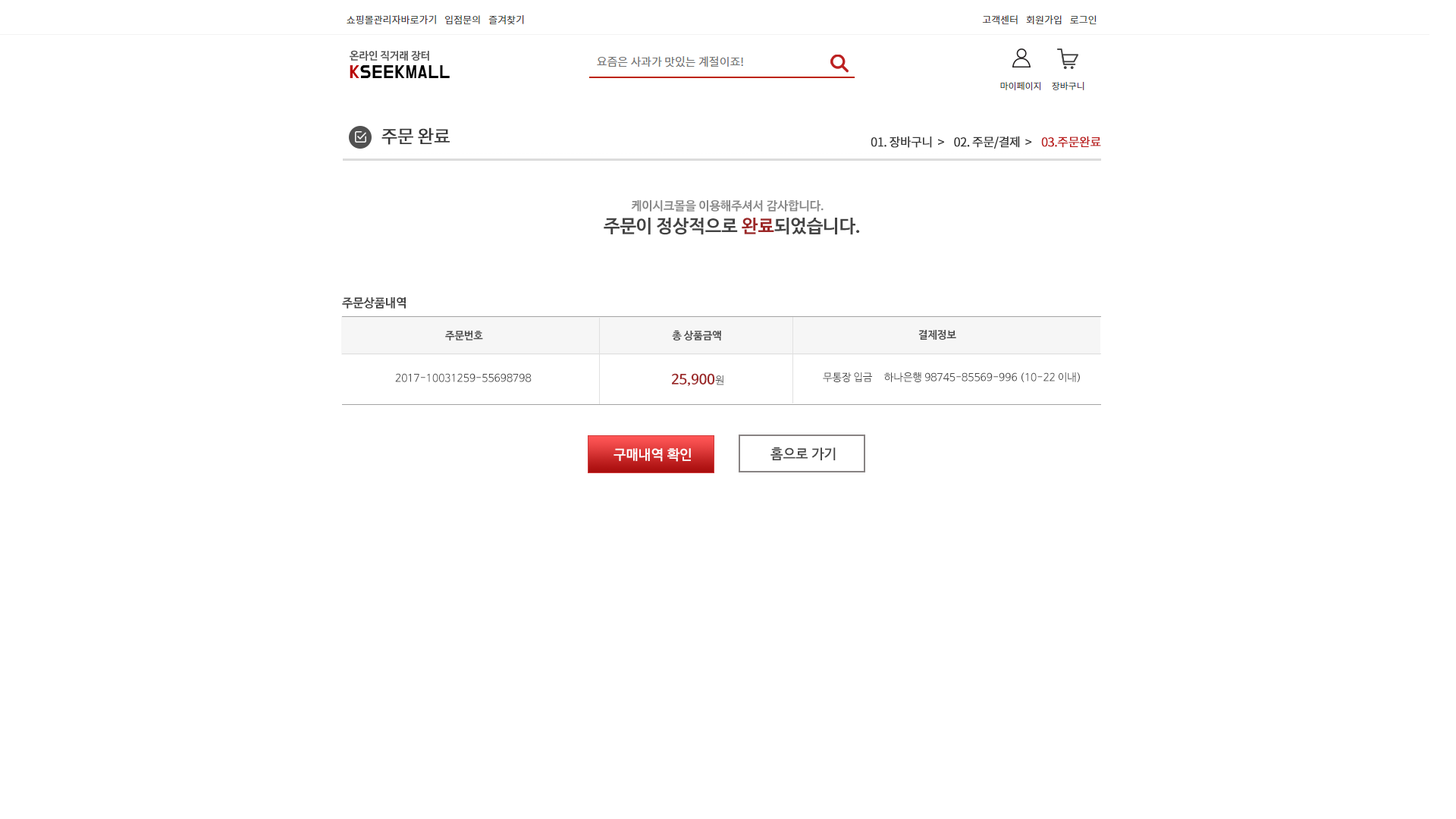
<style>
.page{position:relative;width:1456px;height:819px;background:#ffffff}
.page>*{position:absolute;margin:0}
.t1{font:18.2px "NotoSansCJKkr-Regular";letter-spacing:-0.05em;color:#373737;font-weight:bold}
.t2{font:12.1px "NotoSansCJKkr-Regular";letter-spacing:-0.05em;color:#373737;font-weight:bold}
.t3{font:12.1px "NotoSansCJKkr-Regular";letter-spacing:-0.05em;color:#bc2020;font-weight:bold}
.t4{font:12.1px "NanumBarunGothicBold";color:#888888}
.t5{font:18.2px "NanumBarunGothicBold";color:#434343}
.t6{font:18.2px "NanumBarunGothicBold";color:#9c2727}
.t7{font:12.1px "NanumBarunGothicBold";color:#434343}
.t8{font:10.6px "NanumBarunGothicBold";color:#494949}
.t9{font:10.6px "NanumBarunGothic";color:#494949}
.t10{font:13.6px "NanumBarunGothicBold";color:#9c2727}
.t11{font:13.6px "NanumBarunGothic";color:#ffffff;font-weight:bold}
.t12{font:13.6px "NanumBarunGothic";color:#494949;font-weight:bold}
</style>
<div class="page">
<p class="t1" style="left:381px;top:127px;width:69px;height:18px">주문 완료</p>
<p class="t2" style="left:871px;top:136px;width:230px;height:13px">01. 장바구니  &gt;    02. 주문/결제  &gt;    <span class="t3">03.주문완료</span></p>
<p class="t4" style="left:631px;top:200px;width:193px;height:12px">케이시크몰을 이용해주셔서 감사합니다.</p>
<p class="t5" style="left:604px;top:218px;width:256px;height:17px">주문이 정상적으로 <span class="t6">완료</span>되었습니다.</p>
<p class="t7" style="left:342px;top:297px;width:64px;height:12px">주문상품내역</p>
<p class="t8" style="left:672px;top:330px;width:49px;height:10px">총 상품금액</p>
<p class="t8" style="left:918px;top:330px;width:38px;height:10px">결제정보</p>
<p class="t8" style="left:445px;top:331px;width:38px;height:9px">주문번호</p>
<p class="t9" style="left:395px;top:373px;width:137px;height:9px">2017-10031259-55698798</p>
<p class="t10" style="left:672px;top:373px;width:52px;height:13px">25,900<span class="t9">원</span></p>
<p class="t9" style="left:823px;top:372px;width:49px;height:10px">무통장 입금</p>
<p class="t9" style="left:884px;top:372px;width:196px;height:10px">하나은행 98745-85569-996 (10-22 이내)</p>
<p class="t11" style="left:613px;top:448px;width:78px;height:14px">구매내역 확인</p>
<p class="t12" style="left:770px;top:447px;width:66px;height:13px">홈으로 가기</p>
</div>
